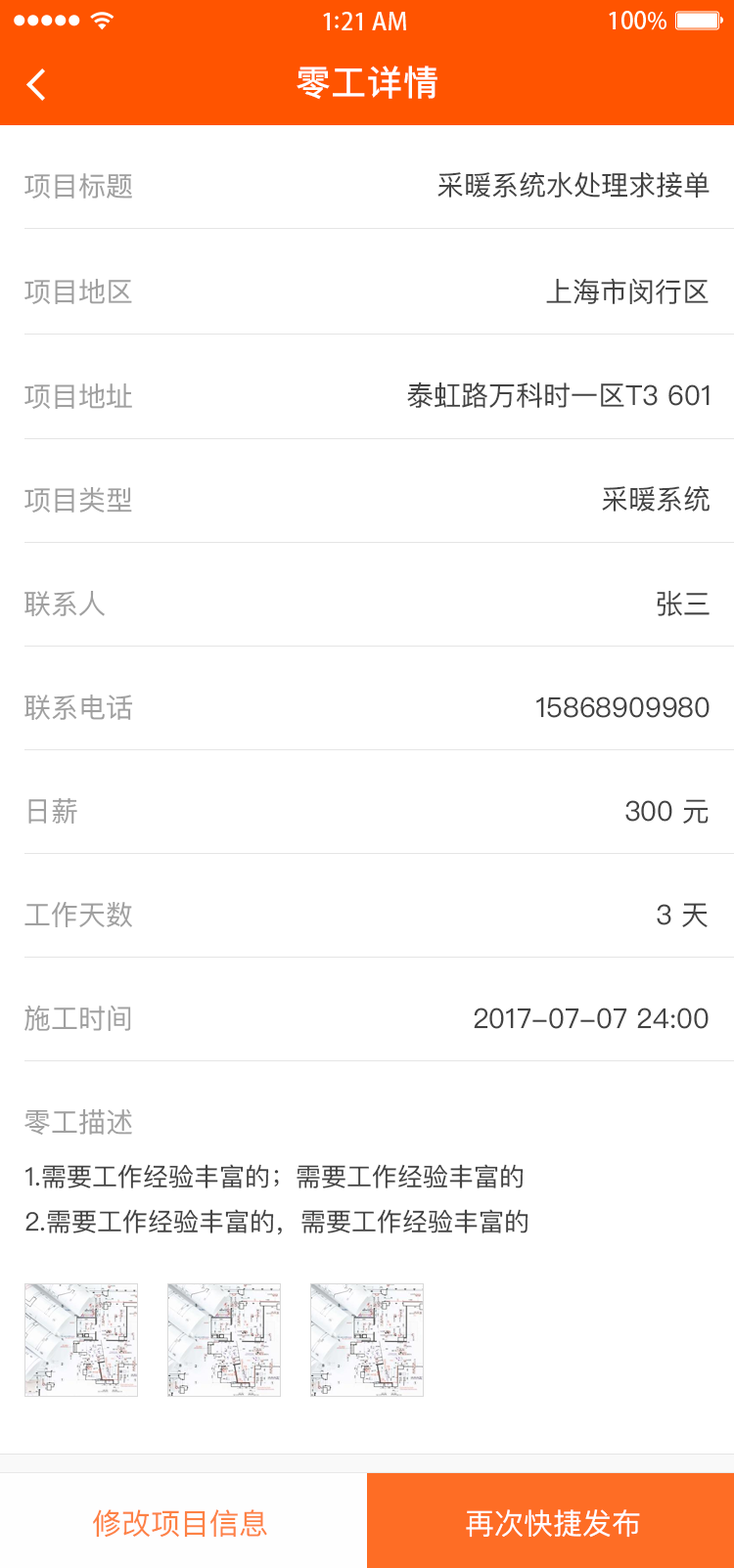
<style>
.page{position:relative;width:734px;height:1568px;background:#ffffff}
.page>*{position:absolute;margin:0}
.t1{font:35.2px "PingFangSC-Medium";letter-spacing:0.02em;color:#ffffff}
.t2{font:27.4px "PingFangSC-Regular";color:#a0a0a0}
.t3{font:27.4px "PingFangSC-Regular";color:#434343}
.t4{font:25.4px/48.9px "PingFangSC-Regular";color:#434343}
.t5{font:29.3px "PingFangSC-Regular";color:#fd8245}
.t6{font:29.3px "PingFangSC-Regular";color:#ffffff}
</style>
<div class="page">
<p class="t1" style="left:296px;top:66px;width:141px;height:34px">零工详情</p>
<p class="t2" style="left:24px;top:173px;width:108px;height:26px">项目标题</p>
<p class="t3" style="left:437px;top:171px;width:272px;height:27px">采暖系统水处理求接单</p>
<p class="t2" style="left:24px;top:279px;width:108px;height:25px">项目地区</p>
<p class="t3" style="left:546px;top:278px;width:162px;height:26px">上海市闵行区</p>
<p class="t2" style="left:24px;top:383px;width:108px;height:26px">项目地址</p>
<p class="t3" style="left:407px;top:381px;width:302px;height:27px">泰虹路万科时一区T3 601</p>
<p class="t3" style="left:602px;top:485px;width:107px;height:27px">采暖系统</p>
<p class="t2" style="left:24px;top:487px;width:108px;height:26px">项目类型</p>
<p class="t2" style="left:24px;top:591px;width:81px;height:26px">联系人</p>
<p class="t3" style="left:656px;top:591px;width:53px;height:25px">张三</p>
<p class="t2" style="left:24px;top:694px;width:109px;height:27px">联系电话</p>
<p class="t3" style="left:536px;top:696px;width:173px;height:22px">15868909980</p>
<p class="t2" style="left:28px;top:798px;width:49px;height:26px">日薪</p>
<p class="t3" style="left:625px;top:799px;width:83px;height:25px">300 元</p>
<p class="t2" style="left:24px;top:902px;width:108px;height:25px">工作天数</p>
<p class="t3" style="left:656px;top:903px;width:51px;height:24px">3 天</p>
<p class="t2" style="left:24px;top:1005px;width:107px;height:26px">施工时间</p>
<p class="t3" style="left:473px;top:1008px;width:235px;height:21px">2017-07-07 24:00</p>
<p class="t2" style="left:24px;top:1109px;width:108px;height:27px">零工描述</p>
<p class="t4" style="left:25px;top:1164px;width:503px;height:71px">1.需要工作经验丰富的；需要工作经验丰富的<br>2.需要工作经验丰富的，需要工作经验丰富的</p>
<p class="t5" style="left:93px;top:1509px;width:174px;height:29px">修改项目信息</p>
<p class="t6" style="left:466px;top:1509px;width:174px;height:29px">再次快捷发布</p>
</div>
